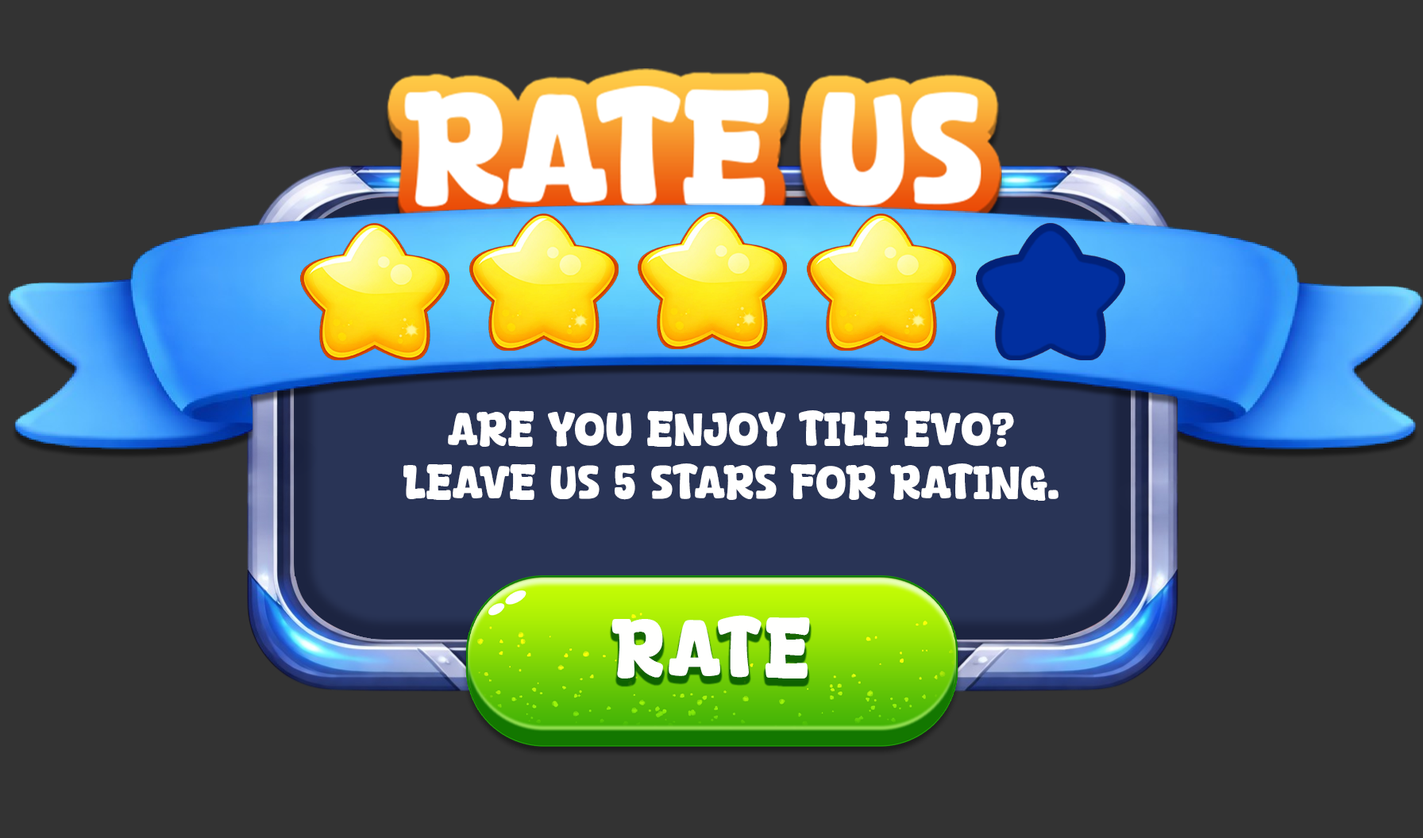
<style>
.page{position:relative;width:1423px;height:838px;background:#333333}
.page>*{position:absolute;margin:0}
.t1{font:44.5px "Free-Royalty";color:#ffffff}
.t2{font:77.2px "Free-Royalty";letter-spacing:0.04em;color:#fffffe}
</style>
<div class="page">
<p class="t1" style="left:403px;top:410px;width:655px;height:91px;text-align:center">ARE YOU ENJOY TILE EVO?<br>LEAVE US 5 STARS FOR RATING.</p>
<p class="t2" style="left:611px;top:615px;width:199px;height:64px">RATE</p>
</div>
